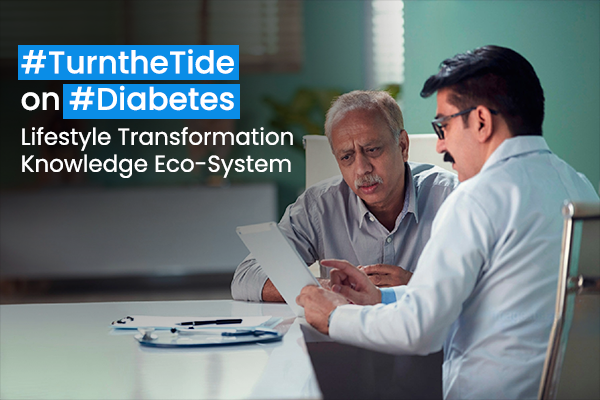
<style>
.page{position:relative;width:600px;height:400px}
.page>*{position:absolute;margin:0}
.t1{font:31.1px/36.6px "Poppins-Medium";color:#ffffff}
.t2{font:23px/27px "Poppins-Regular";color:#ffffff}
</style>
<div class="page">
<p class="t1" style="left:21px;top:49px;width:213px;height:62px">#TurntheTide<br>on #Diabetes</p>
<p class="t2" style="left:22px;top:127px;width:271px;height:51px">Lifestyle Transformation Knowledge Eco-System</p>
</div>
